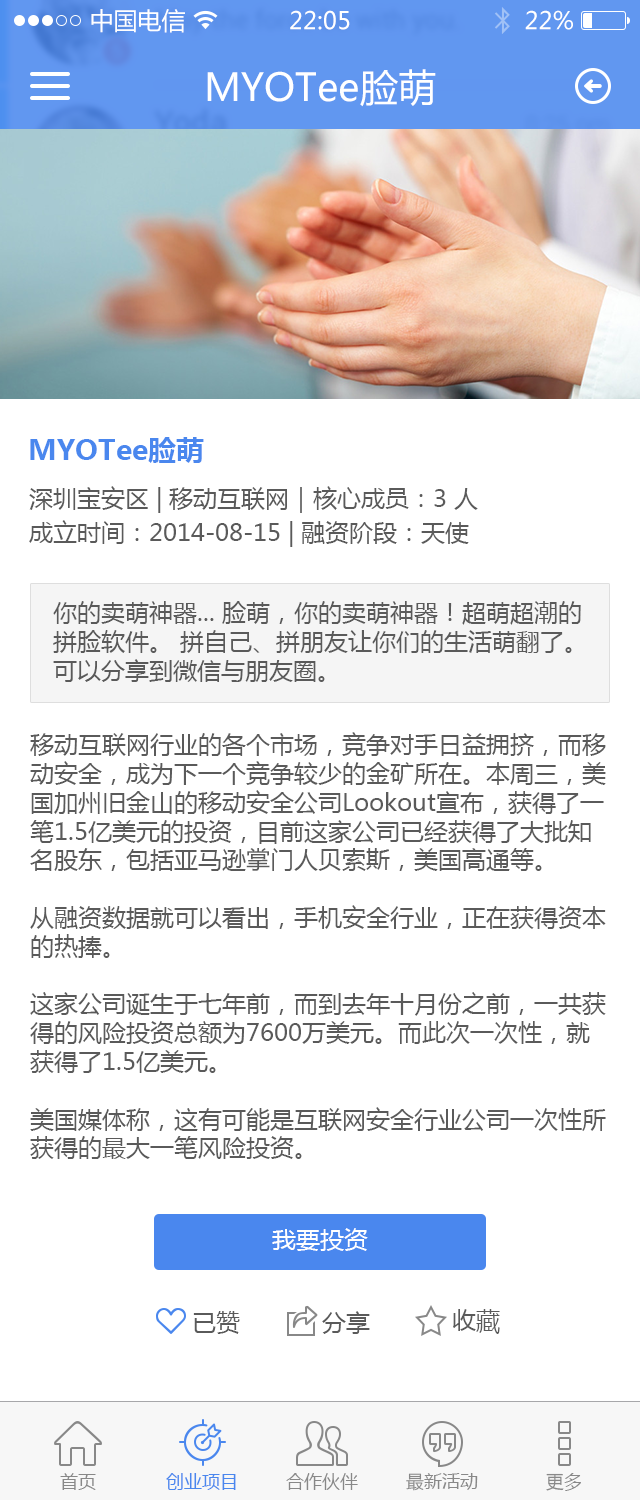
<style>
.page{position:relative;width:640px;height:1500px;background:#ffffff}
.page>*{position:absolute;margin:0}
.t1{font:24px "MicrosoftYaHei";color:#ffffff}
.t2{font:38px "MicrosoftYaHei";color:#ffffff}
.t3{font:28px "MicrosoftYaHei-Bold";color:#4a87ee}
.t4{font:24px "MicrosoftYaHei";color:#5a5a5a}
.t5{font:18px "MicrosoftYaHei";color:#888888}
.t6{font:18px "MicrosoftYaHei";color:#4a87ee}
</style>
<div class="page">
<p class="t1" style="left:91px;top:9px;width:94px;height:24px">中国电信</p>
<p class="t1" style="left:290px;top:10px;width:60px;height:20px">22:05</p>
<p class="t1" style="left:525px;top:10px;width:48px;height:20px">22%</p>
<p class="t2" style="left:207px;top:69px;width:229px;height:38px">MYOTee脸萌</p>
<p class="t3" style="left:30px;top:437px;width:174px;height:26px">MYOTee脸萌</p>
<p class="t4" style="left:29px;top:486px;width:449px;height:27px">深圳宝安区 | 移动互联网｜核心成员：3 人</p>
<p class="t4" style="left:29px;top:520px;width:440px;height:27px">成立时间：2014-08-15 | 融资阶段：天使</p>
<p class="t4" style="left:53px;top:601px;width:528px;height:81px">你的卖萌神器... 脸萌，你的卖萌神器！超萌超潮的拼脸软件。 拼自己、拼朋友让你们的生活萌翻了。可以分享到微信与朋友圈。</p>
<p class="t4" style="left:30px;top:732px;width:576px;height:427px">移动互联网行业的各个市场，竞争对手日益拥挤，而移动安全，成为下一个竞争较少的金矿所在。本周三，美国加州旧金山的移动安全公司Lookout宣布，获得了一笔1.5亿美元的投资，目前这家公司已经获得了大批知名股东，包括亚马逊掌门人贝索斯，美国高通等。<br><br>从融资数据就可以看出，手机安全行业，正在获得资本的热捧。<br><br>这家公司诞生于七年前，而到去年十月份之前，一共获得的风险投资总额为7600万美元。而此次一次性，就获得了1.5亿美元。<br><br>美国媒体称，这有可能是互联网安全行业公司一次性所获得的最大一笔风险投资。</p>
<p class="t1" style="left:272px;top:1228px;width:96px;height:23px">我要投资</p>
<p class="t4" style="left:193px;top:1311px;width:47px;height:23px">已赞</p>
<p class="t4" style="left:322px;top:1311px;width:48px;height:23px">分享</p>
<p class="t4" style="left:453px;top:1309px;width:47px;height:25px">收藏</p>
<p class="t5" style="left:60px;top:1473px;width:36px;height:17px">首页</p>
<p class="t6" style="left:166px;top:1473px;width:70px;height:17px">创业项目</p>
<p class="t5" style="left:286px;top:1473px;width:72px;height:17px">合作伙伴</p>
<p class="t5" style="left:406px;top:1473px;width:72px;height:18px">最新活动</p>
<p class="t5" style="left:546px;top:1473px;width:35px;height:18px">更多</p>
</div>
